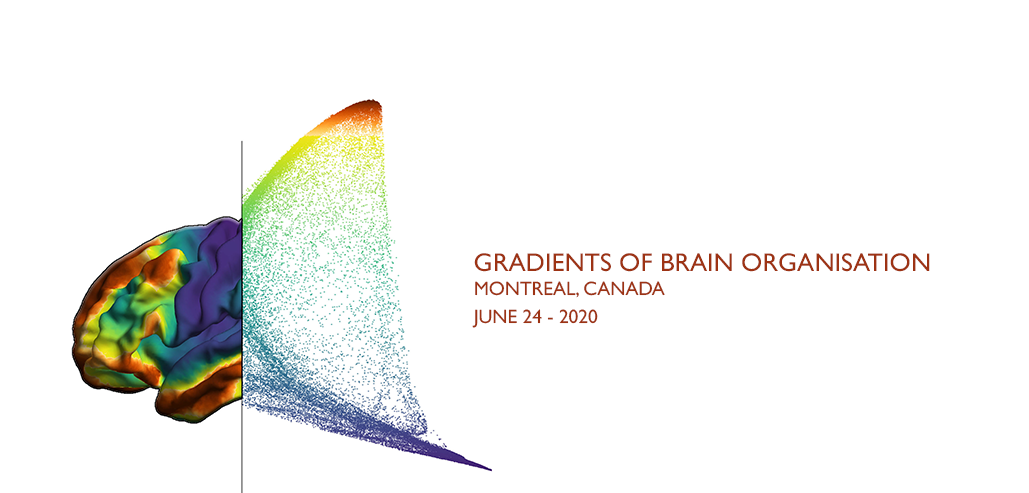
<style>
.page{position:relative;width:1029px;height:493px;background:#ffffff}
.page>*{position:absolute;margin:0}
.t1{font:33.3px/27.7px "GillSansMT";color:#9d3314}
.t2{font:44.3px/27.7px "GillSansMT";color:#9d3314}
</style>
<div class="page">
<p class="t1" style="left:472px;top:253px;width:458px;height:75px"><span class="t2">GRADIENTS OF BRAIN ORGANISATION<br></span>MONTREAL, CANADA  <br>JUNE 24 - 2020</p>
</div>
